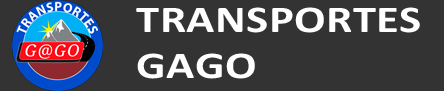
<style>
.page{position:relative;width:444px;height:91px;background:#333333}
.page>*{position:absolute;margin:0}
.t1{font:38.1px "Calibri-Bold";letter-spacing:0.01em;color:#ffffff;scale:1.23 1}
</style>
<div class="page">
<p class="t1" style="left:136px;top:7px;width:284px;height:72px">TRANSPORTES<br>GAGO</p>
</div>
